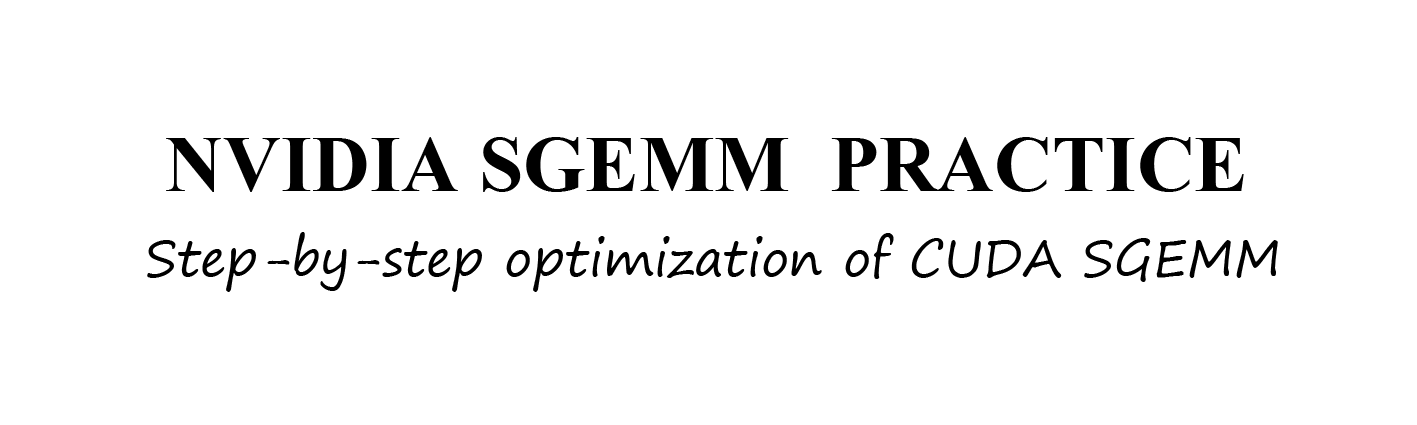
<style>
.page{position:relative;width:1417px;height:425px;background:#ffffff}
.page>*{position:absolute;margin:0}
.t1{font:80px "TimesNewRomanPS-BoldMT";color:#000000}
.t2{font:50px "SegoePrint";color:#000000}
</style>
<div class="page">
<p class="t1" style="left:166px;top:137px;width:1078px;height:55px">NVIDIA SGEMM  PRACTICE</p>
<p class="t2" style="left:147px;top:232px;width:1131px;height:60px">Step-by-step optimization of CUDA SGEMM</p>
</div>
